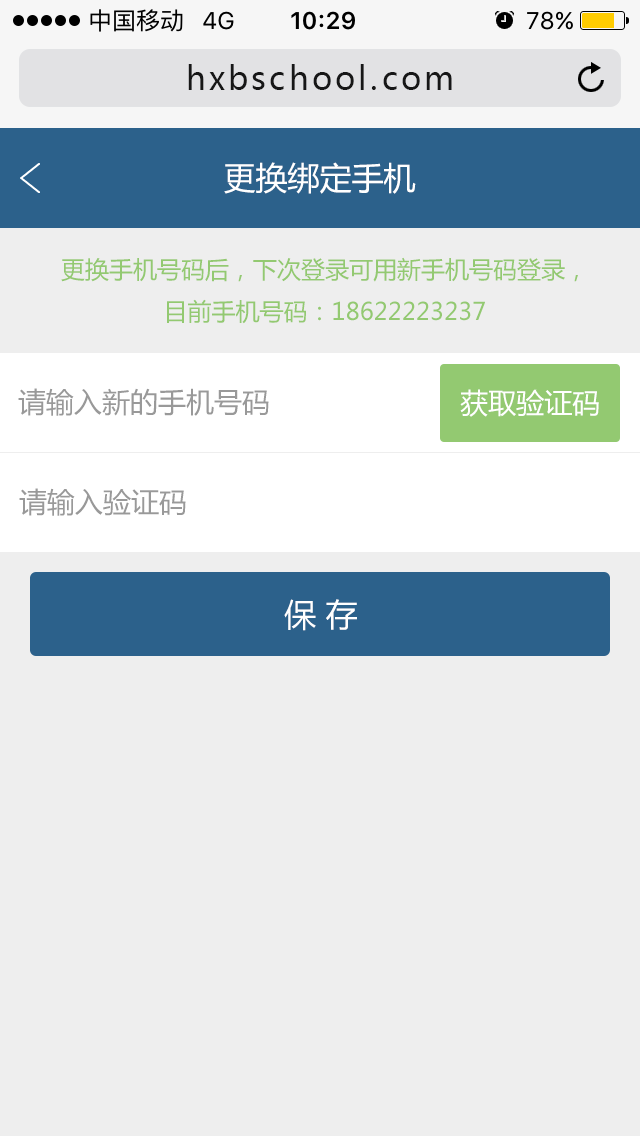
<style>
.page{position:relative;width:640px;height:1136px;background:#eeeeee}
.page>*{position:absolute;margin:0}
.t1{font:32px "MicrosoftYaHei";letter-spacing:0.1em;color:#171717}
.t2{font:32px "MicrosoftYaHei";color:#ffffff}
.t3{font:24px "MicrosoftYaHei";color:#93c971}
.t4{font:28px "MicrosoftYaHei";color:#999999}
.t5{font:28px "MicrosoftYaHei";color:#ffffff}
</style>
<div class="page">
<p class="t1" style="left:188px;top:64px;width:264px;height:26px">hxbschool.com</p>
<p class="t2" style="left:224px;top:162px;width:192px;height:32px">更换绑定手机</p>
<p class="t3" style="left:61px;top:257px;width:517px;height:67px;text-align:center">更换手机号码后，下次登录可用新手机号码登录，<br>目前手机号码：18622223237</p>
<p class="t4" style="left:18px;top:388px;width:251px;height:28px">请输入新的手机号码</p>
<p class="t5" style="left:460px;top:389px;width:139px;height:28px">获取验证码</p>
<p class="t4" style="left:19px;top:488px;width:167px;height:28px">请输入验证码</p>
<p class="t2" style="left:284px;top:599px;width:73px;height:32px">保 存</p>
</div>
